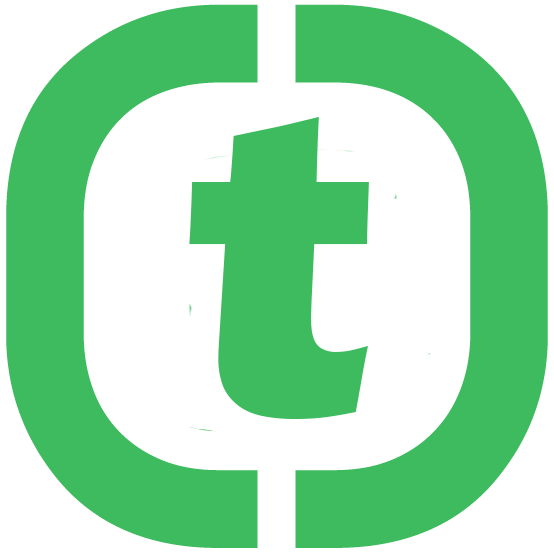
<style>
.page{position:relative;width:554px;height:552px;background:#ffffff}
.page>*{position:absolute;margin:0}
.t1{font:469.7px "ErasITC-Bold";color:#3dbb5e}
</style>
<div class="page">
<p class="t1" style="left:189px;top:117px;width:180px;height:302px">t</p>
</div>
